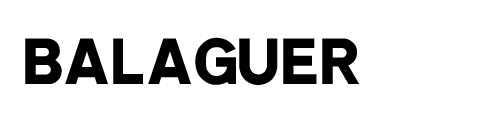
<style>
.page{position:relative;width:500px;height:119px;background:#ffffff}
.page>*{position:absolute;margin:0}
.t1{font:64px "Ccrige-Regular";color:#000000}
</style>
<div class="page">
<p class="t1" style="left:25px;top:37px;width:334px;height:49px">ÀBALAGUER</p>
</div>
